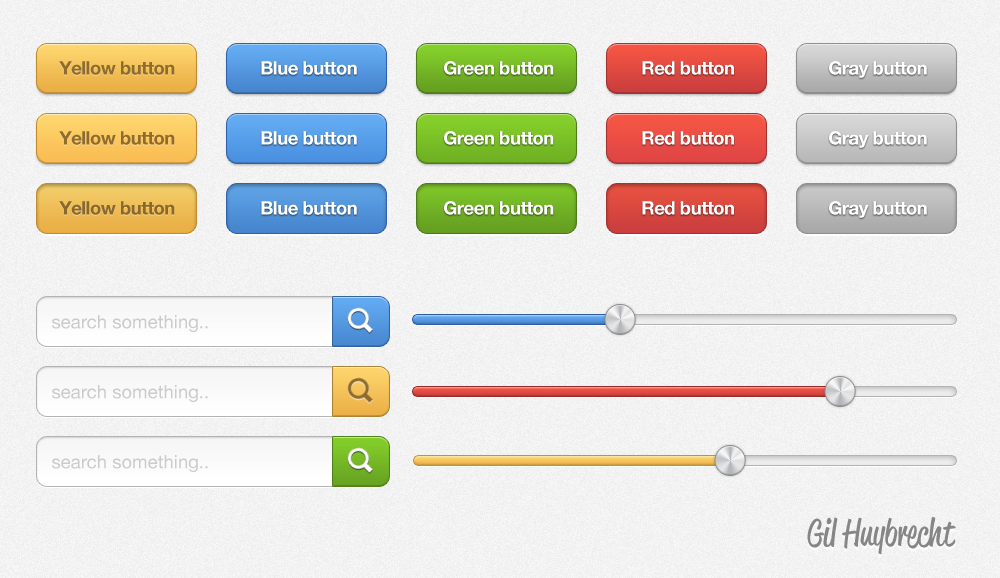
<style>
.page{position:relative;width:1000px;height:578px}
.page>*{position:absolute;margin:0}
.t1{font:18.5px "HelveticaNeue-Bold";letter-spacing:-0.025em;color:#8f6c2c}
.t2{font:18.5px "HelveticaNeue-Bold";letter-spacing:-0.025em;color:#ffffff}
.t3{font:18.5px "HelveticaNeue-Bold";letter-spacing:-0.025em;color:#89682b}
.t4{font:18.5px "HelveticaNeue";color:#cbcbcb}
</style>
<div class="page">
<p class="t1" style="left:59px;top:61px;width:116px;height:14px">Yellow button</p>
<p class="t2" style="left:261px;top:61px;width:96px;height:14px">Blue button</p>
<p class="t2" style="left:444px;top:61px;width:110px;height:14px">Green button</p>
<p class="t2" style="left:642px;top:61px;width:92px;height:14px">Red button</p>
<p class="t2" style="left:829px;top:61px;width:98px;height:17px">Gray button</p>
<p class="t1" style="left:59px;top:131px;width:116px;height:14px">Yellow button</p>
<p class="t2" style="left:261px;top:131px;width:96px;height:14px">Blue button</p>
<p class="t2" style="left:444px;top:131px;width:110px;height:14px">Green button</p>
<p class="t2" style="left:642px;top:131px;width:92px;height:14px">Red button</p>
<p class="t2" style="left:829px;top:131px;width:98px;height:17px">Gray button</p>
<p class="t3" style="left:59px;top:201px;width:116px;height:14px">Yellow button</p>
<p class="t2" style="left:261px;top:201px;width:96px;height:14px">Blue button</p>
<p class="t2" style="left:444px;top:201px;width:110px;height:14px">Green button</p>
<p class="t2" style="left:642px;top:201px;width:92px;height:14px">Red button</p>
<p class="t2" style="left:829px;top:201px;width:98px;height:17px">Gray button</p>
<p class="t4" style="left:52px;top:315px;width:156px;height:17px">search something..</p>
<p class="t4" style="left:52px;top:385px;width:156px;height:17px">search something..</p>
<p class="t4" style="left:52px;top:455px;width:156px;height:17px">search something..</p>
</div>
